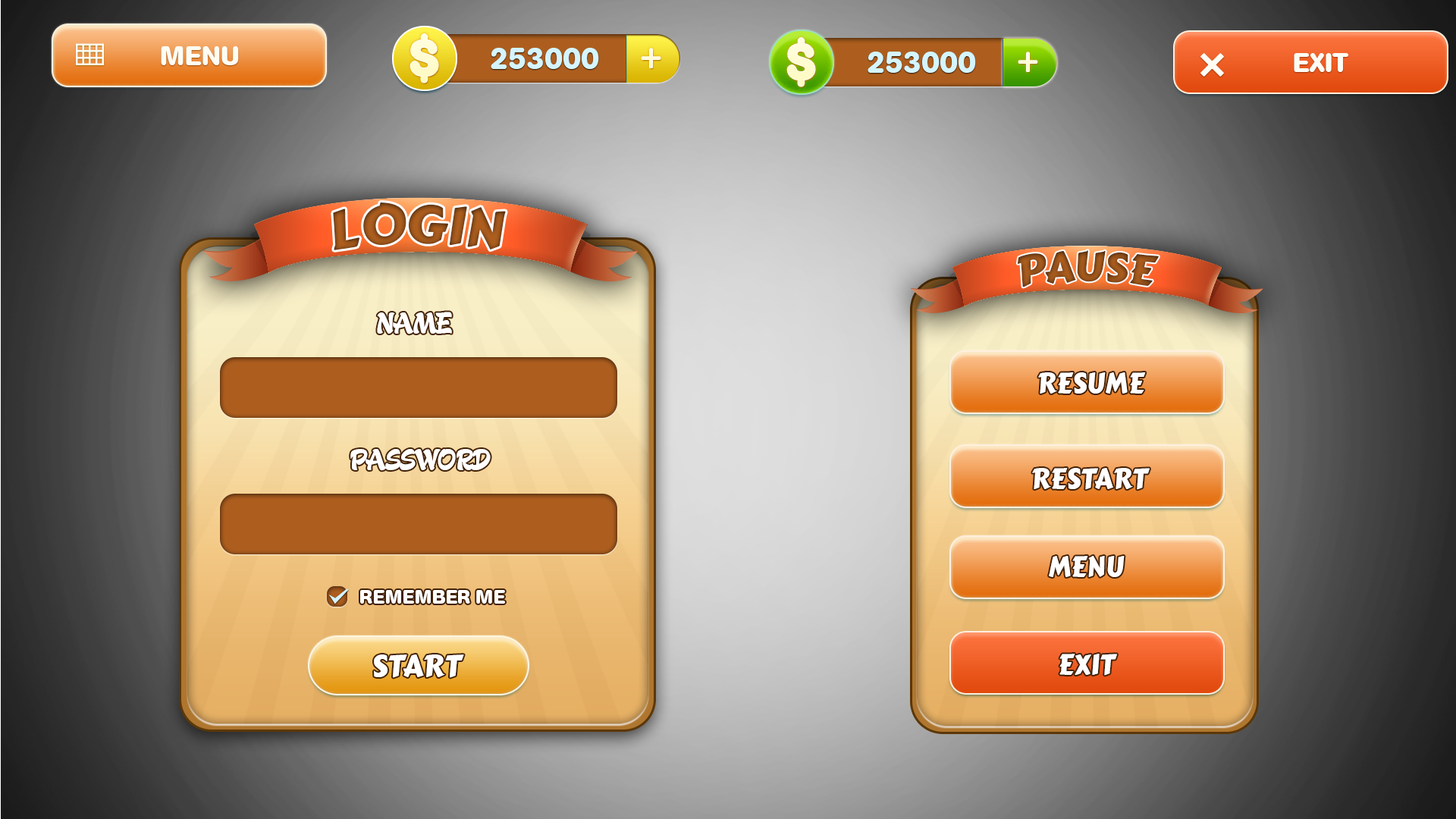
<style>
.page{position:relative;width:1456px;height:819px}
.page>*{position:absolute;margin:0}
.t1{font:26.5px "AGBookRounded-Bold";color:#fdfdf3;text-transform:uppercase}
.t2{font:30.3px "AGBookRounded-Bold";color:#d4f5ff;text-transform:uppercase}
.t3{font:53.1px "CarterOne";color:#9a541b;text-transform:uppercase}
.t4{font:41.7px "CarterOne";color:#924f19;text-transform:uppercase}
.t5{font:30.3px "GeckoPersonalUseOnly";color:#fefefe;text-transform:uppercase}
.t6{font:28.1px "CarterOne";color:#ffffff;text-transform:uppercase}
.t7{font:30.3px "GeckoPersonalUseOnly";color:#ffffff;text-transform:uppercase}
.t8{font:19px "AGBookRounded-Bold";color:#ffffff;text-transform:uppercase}
.t9{font:30.3px "CarterOne";color:#ffffff;text-transform:uppercase}
</style>
<div class="page">
<p class="t1" style="left:161px;top:46px;width:78px;height:19px">MENU</p>
<p class="t2" style="left:491px;top:48px;width:108px;height:21px">253000</p>
<p class="t2" style="left:868px;top:52px;width:108px;height:21px">253000</p>
<p class="t1" style="left:1294px;top:53px;width:55px;height:19px">EXIT</p>
<p class="t3" style="left:333px;top:202px;width:173px;height:48px">LOGIN</p>
<p class="t4" style="left:1017px;top:250px;width:142px;height:37px">PAUSE</p>
<p class="t5" style="left:377px;top:312px;width:75px;height:22px">NAME</p>
<p class="t6" style="left:1038px;top:372px;width:108px;height:22px">resume</p>
<p class="t7" style="left:350px;top:449px;width:141px;height:22px">PASSWORD</p>
<p class="t6" style="left:1032px;top:468px;width:118px;height:22px">restart</p>
<p class="t6" style="left:1049px;top:556px;width:76px;height:21px">menu</p>
<p class="t8" style="left:360px;top:590px;width:145px;height:14px">REMEMBER ME</p>
<p class="t6" style="left:1059px;top:654px;width:58px;height:22px">exit</p>
<p class="t9" style="left:374px;top:654px;width:90px;height:24px">START</p>
</div>
